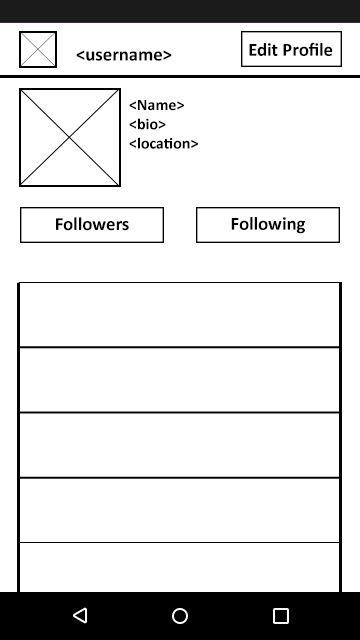
<style>
.page{position:relative;width:360px;height:640px;background:#ffffff}
.page>*{position:absolute;margin:0}
.t1{font:18.9px "Calibri-Bold";color:#000000}
.t2{font:18.7px "Calibri-Bold";color:#000000}
.t3{font:16px "Calibri-Bold";color:#000000}
</style>
<div class="page">
<p class="t1" style="left:76px;top:50px;width:96px;height:11px">&lt;username&gt;</p>
<p class="t2" style="left:249px;top:42px;width:84px;height:14px">Edit Profile</p>
<p class="t3" style="left:129px;top:100px;width:69px;height:49px">&lt;Name&gt;<br>&lt;bio&gt;<br>&lt;location&gt;</p>
<p class="t2" style="left:56px;top:217px;width:73px;height:14px">Followers</p>
<p class="t2" style="left:231px;top:217px;width:74px;height:17px">Following</p>
</div>
